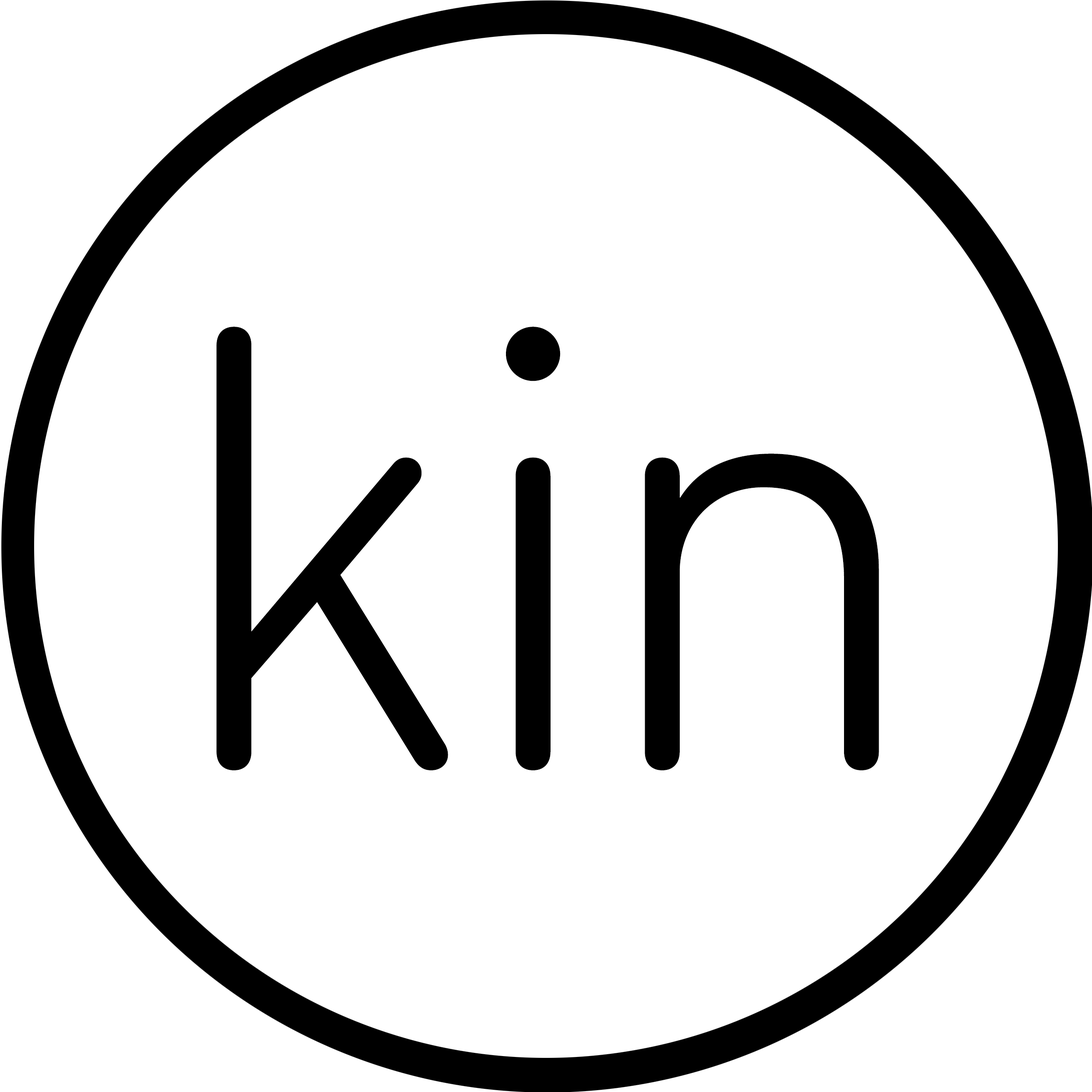
<style>
.page{position:relative;width:1092px;height:1092px;background:#ffffff}
.page>*{position:absolute;margin:0}
.t1{font:644.6px "DINNextRoundedLTPro-Light";color:#000000}
</style>
<div class="page">
<p class="t1" style="left:216px;top:327px;width:663px;height:443px">kin</p>
</div>
